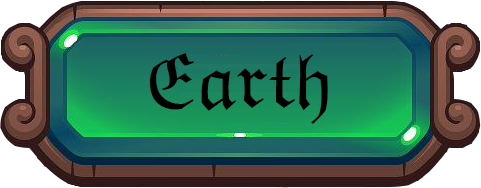
<style>
.page{position:relative;width:481px;height:188px}
.page>*{position:absolute;margin:0}
.t1{font:80px "EuclidFraktur";color:#000000}
</style>
<div class="page">
<p class="t1" style="left:149px;top:53px;width:179px;height:71px">Earth</p>
</div>
